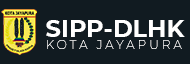
<style>
.page{position:relative;width:190px;height:64px;background:#111b21}
.page>*{position:absolute;margin:0}
.t1{font:24px "Montserrat-Bold";color:#ffffff}
.t2{font:12px "Montserrat-Thin";letter-spacing:0.26em;color:#ffffff}
</style>
<div class="page">
<p class="t1" style="left:46px;top:20px;width:139px;height:17px">SIPP-DLHK</p>
<p class="t2" style="left:47px;top:40px;width:135px;height:9px">KOTA JAYAPURA</p>
</div>
